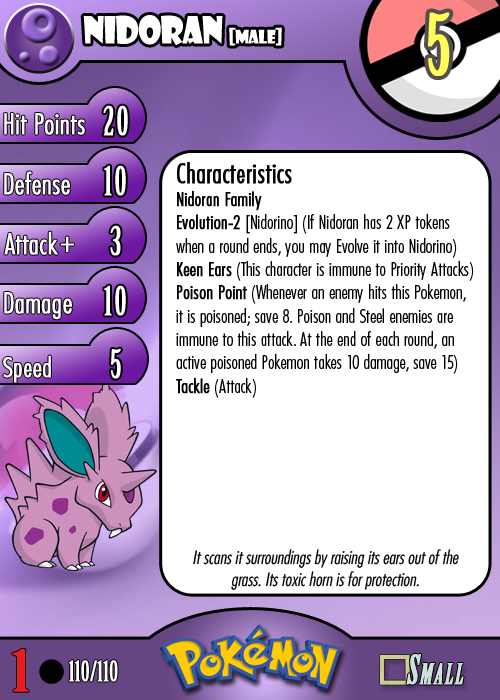
<style>
.page{position:relative;width:500px;height:700px;background:#ffffff}
.page>*{position:absolute;margin:0}
.t1{font:36.7px "ShowcardGothic-Reg";letter-spacing:-0.025em;color:#ffffff;scale:0.91 1}
.t2{font:18.3px "ShowcardGothic-Reg";letter-spacing:-0.025em;color:#ffffff;scale:0.91 1}
.t3{font:83.3px "BirchStd";letter-spacing:0.025em;color:#fffd59;font-weight:bold}
.t4{font:27.8px "Futura-CondensedLight";color:#ffffff;font-weight:bold}
.t5{font:38.9px "BirchStd";letter-spacing:0.035em;color:#ffffff;font-weight:bold}
.t6{font:19.4px "FuturaCondensedBQ-Light";color:#010101}
.t7{font:27.8px "FuturaCondensedBQ-Light";color:#010101;font-weight:bold}
.t8{font:19.4px "FuturaCondensedBQ-Light";color:#010101;font-weight:bold}
.t9{font:30.6px "Futura-CondensedLight";color:#ffffff;font-weight:bold}
.t10{font:27.8px "FuturaCondensedBQ-Light";color:#ffffff;font-weight:bold}
.t11{font:18.1px "Futura-CondensedLight";color:#010101;font-style:italic}
.t12{font:55.6px "BirchStd";color:#ed1c24;font-weight:bold;scale:1.5 1}
.t13{font:27.8px "BirchStd";color:#ffffff;font-weight:bold}
</style>
<div class="page">
<p class="t1" style="left:83px;top:15px;width:199px;height:31px">nidoran <span class="t2">[male]</span></p>
<p class="t3" style="left:428px;top:12px;width:22px;height:64px">5</p>
<p class="t4" style="left:4px;top:113px;width:81px;height:22px">Hit Points</p>
<p class="t5" style="left:103px;top:105px;width:25px;height:31px">20</p>
<p class="t4" style="left:4px;top:171px;width:66px;height:24px">Defense</p>
<p class="t5" style="left:104px;top:165px;width:22px;height:31px">10</p>
<p class="t6" style="left:176px;top:162px;width:298px;height:236px"><span class="t7">Characteristics<br></span><span class="t8">Nidoran Family<br>Evolution-2 </span>[Nidorino] (If Nidoran has 2 XP tokens when a round ends, you may Evolve it into Nidorino)<br><span class="t8">Keen Ears</span> (This character is immune to Priority Attacks)<br><span class="t8">Poison Point</span> (Whenever an enemy hits this Pokemon, it is poisoned; save 8. Poison and Steel enemies are immune to this attack. At the end of each round, an active poisoned Pokemon takes 10 damage, save 15)<br><span class="t8">Tackle</span> (Attack)</p>
<p class="t4" style="left:4px;top:231px;width:54px;height:24px">Attack</p>
<p class="t5" style="left:110px;top:225px;width:11px;height:31px">3</p>
<p class="t9" style="left:60px;top:236px;width:14px;height:17px">+</p>
<p class="t4" style="left:4px;top:292px;width:68px;height:28px">Damage</p>
<p class="t5" style="left:104px;top:285px;width:22px;height:31px">10</p>
<p class="t5" style="left:111px;top:348px;width:10px;height:31px">5</p>
<p class="t10" style="left:3px;top:355px;width:48px;height:28px">Speed</p>
<p class="t11" style="left:193px;top:549px;width:266px;height:41px;text-align:center">It scans it surroundings by raising its ears out of the grass. Its toxic horn is for protection.</p>
<p class="t12" style="left:12px;top:649px;width:17px;height:43px">1</p>
<p class="t13" style="left:68px;top:660px;width:50px;height:22px">110/110</p>
</div>
